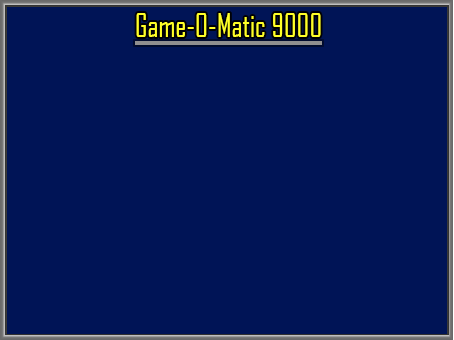
<style>
.page{position:relative;width:454px;height:340px;background:#001456}
.page>*{position:absolute;margin:0}
.t1{font:31.7px "AgencyFB-Reg";color:#f2ff27;scale:0.92 1}
</style>
<div class="page">
<p class="t1" style="left:136px;top:13px;width:185px;height:24px">Game-O-Matic 9000</p>
</div>
